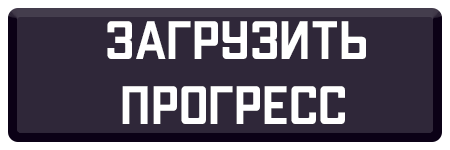
<style>
.page{position:relative;width:450px;height:150px;background:#2f2739}
.page>*{position:absolute;margin:0}
.t1{font:54px "mr_ApexMk3-Medium";color:#ffffff}
</style>
<div class="page">
<p class="t1" style="left:107px;top:21px;width:259px;height:103px">загрузить<br> прогресс</p>
</div>
